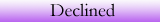
<style>
.page{position:relative;width:160px;height:22px}
.page>*{position:absolute;margin:0}
.t1{font:18.7px "Garamond";color:#000000}
</style>
<div class="page">
<p class="t1" style="left:50px;top:3px;width:65px;height:14px">Declined</p>
</div>
